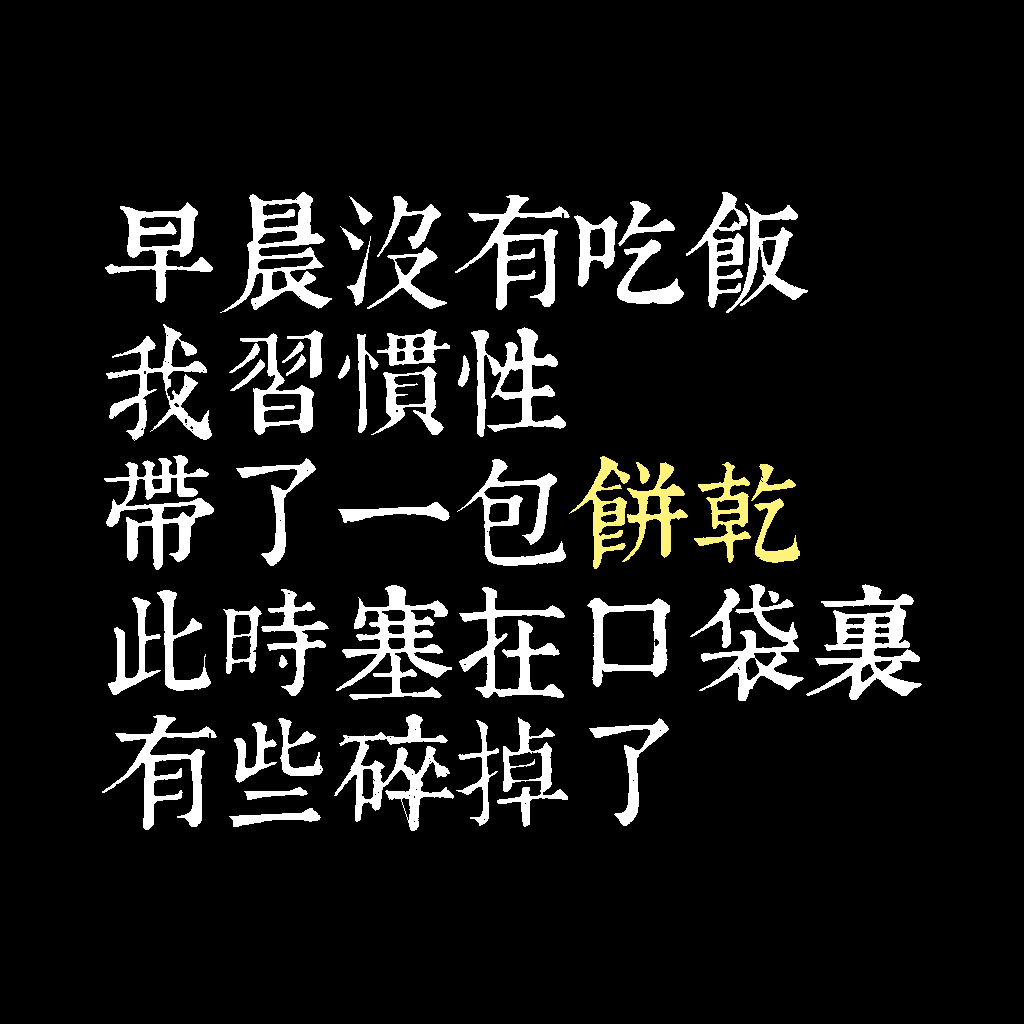
<style>
.page{position:relative;width:1024px;height:1024px;background:#000000}
.page>*{position:absolute;margin:0}
.t1{font:120px/130px "TpldKhangXiDictTrial";letter-spacing:-0.02em;color:#ffffff}
.t2{font:120px/130px "TpldKhangXiDictTrial";letter-spacing:-0.02em;color:#fff27d}
</style>
<div class="page">
<p class="t1" style="left:102px;top:192px;width:820px;height:639px">早晨沒有吃飯<br>我習慣性<br>帶了一包<span class="t2">餅乾<br></span>此時塞在口袋裏<br>有些碎掉了</p>
</div>
